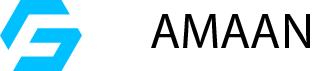
<style>
.page{position:relative;width:323px;height:71px;background:#ffffff}
.page>*{position:absolute;margin:0}
.t1{font:50px "MyriadPro-Regular";color:#000000}
</style>
<div class="page">
<p class="t1" style="left:151px;top:14px;width:159px;height:34px">AMAAN</p>
</div>
